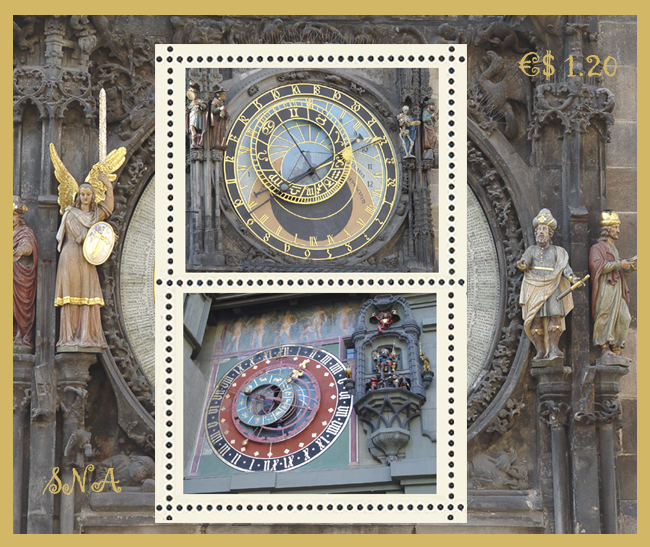
<style>
.page{position:relative;width:650px;height:547px}
.page>*{position:absolute;margin:0}
.t1{font:36px "Gigi-Regular";color:#d2b866}
</style>
<div class="page">
<p class="t1" style="left:518px;top:50px;width:99px;height:31px">€$ 1.20</p>
<p class="t1" style="left:42px;top:464px;width:80px;height:32px">SNA</p>
</div>
